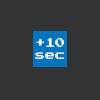
<style>
.page{position:relative;width:100px;height:100px;background:#333333}
.page>*{position:absolute;margin:0}
.t1{font:10px "PressStart2P-Regular";color:#ffffff}
</style>
<div class="page">
<p class="t1" style="left:35px;top:38px;width:29px;height:21px">+10<br>sec</p>
</div>
